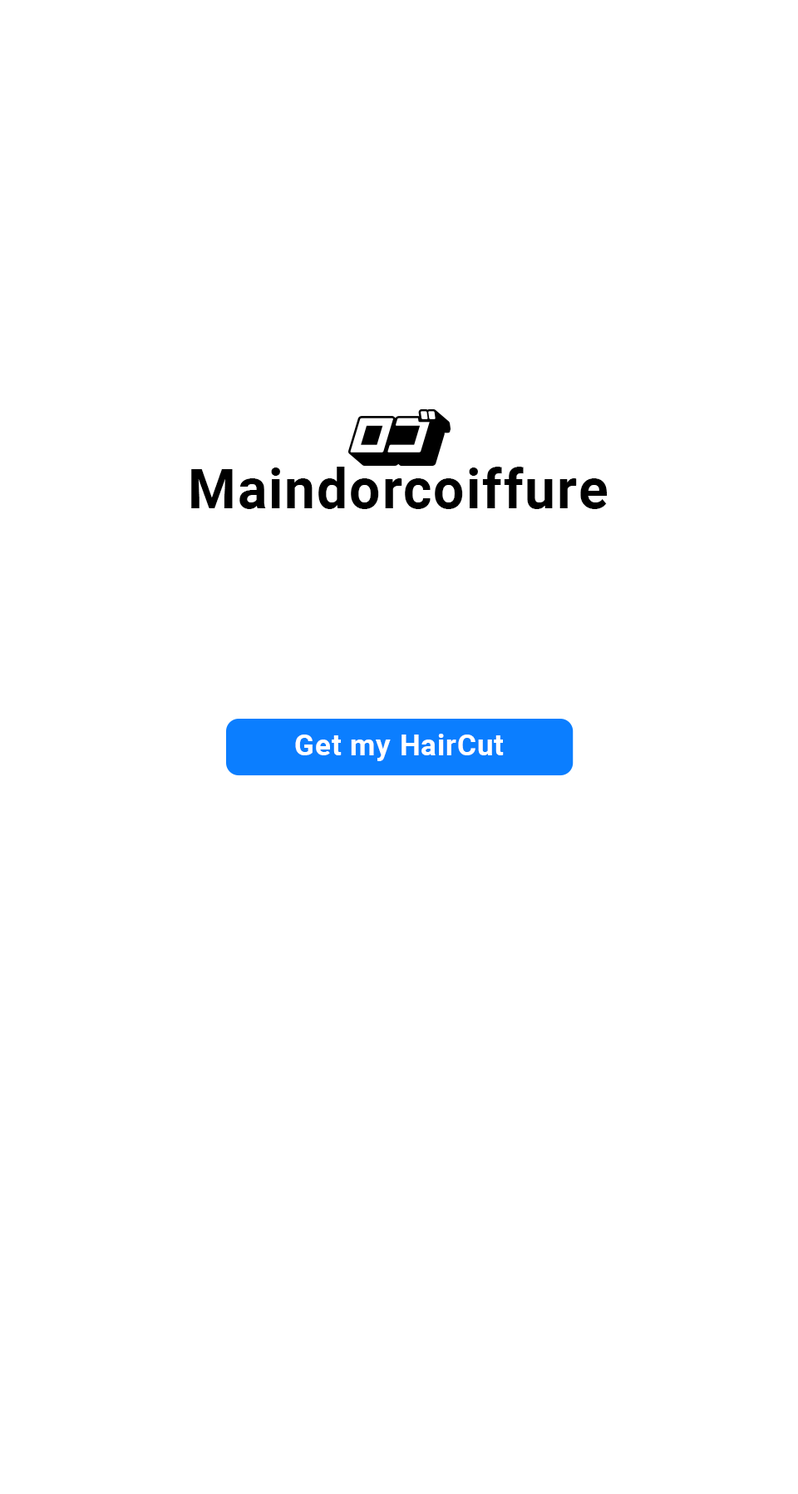
<style>
.page{position:relative;width:798px;height:1494px;background:#ffffff}
.page>*{position:absolute;margin:0}
.t1{font:54.8px "Roboto-Bold";letter-spacing:0.03em;color:#000000}
.t2{font:28.9px "Roboto-Bold";letter-spacing:0.03em;color:#ffffff}
</style>
<div class="page">
<p class="t1" style="left:191px;top:467px;width:416px;height:42px">Maindorcoiffure</p>
<p class="t2" style="left:295px;top:733px;width:209px;height:28px">Get my HairCut</p>
</div>
